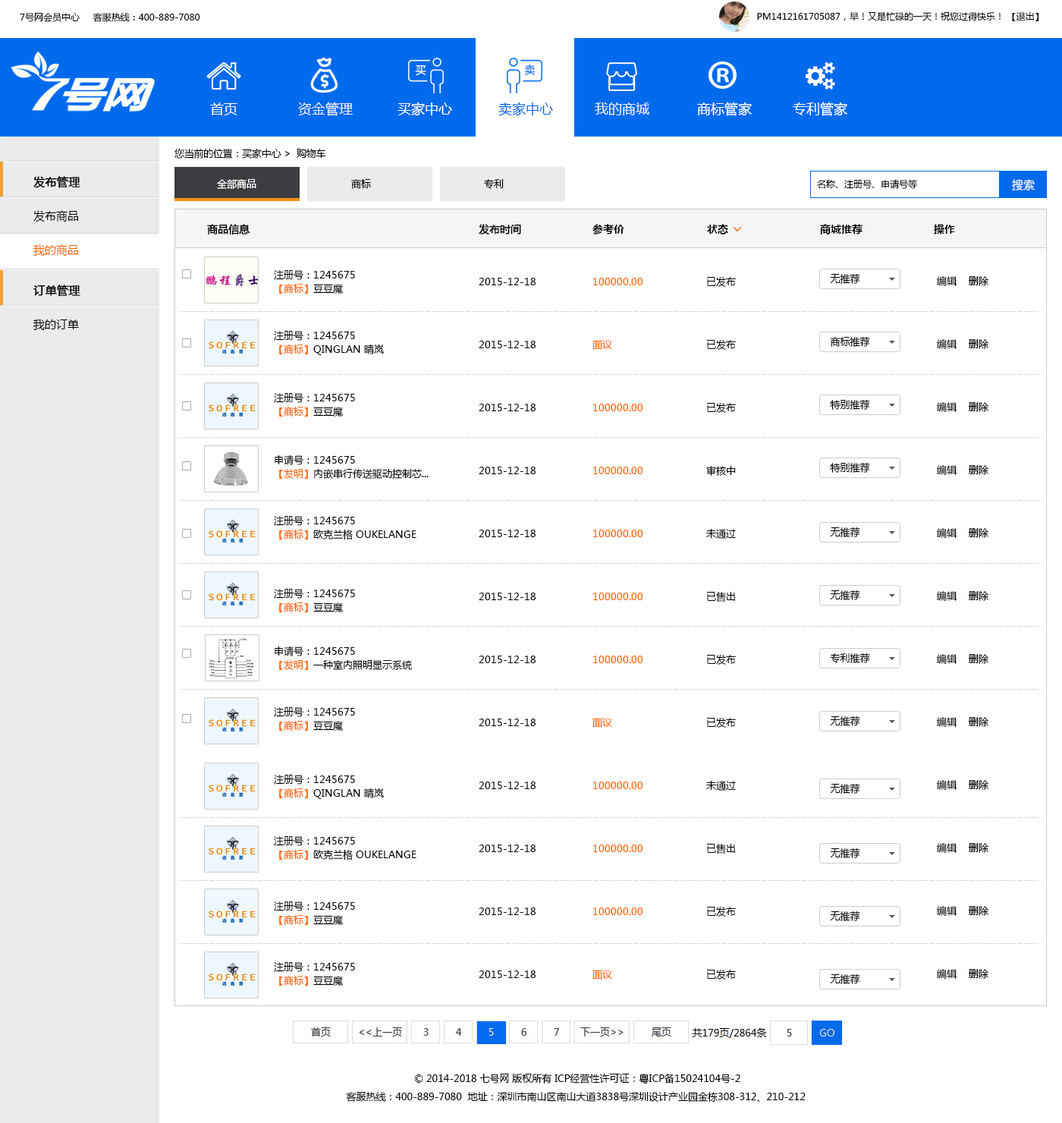
<style>
.page{position:relative;width:1062px;height:1123px;background:#ffffff}
.page>*{position:absolute;margin:0}
.t1{font:9.1px "MicrosoftYaHei";color:#000000}
.t2{font:10.6px "MicrosoftYaHei";color:#ffffff}
.t3{font:10.6px "MicrosoftYaHei";color:#006aed}
.t4{font:13.7px "MicrosoftYaHei";color:#ecf0f1}
.t5{font:13.7px "MicrosoftYaHei";color:#ffffff}
.t6{font:13.7px "MicrosoftYaHei";color:#006aed}
.t7{font:9.9px "MicrosoftYaHei";letter-spacing:-0.02em;color:#000000}
.t8{font:11.4px/34.1px "MicrosoftYaHei";color:#000000;font-weight:bold}
.t9{font:11.4px/34.1px "MicrosoftYaHei";color:#000000}
.t10{font:11.4px/34.1px "MicrosoftYaHei";color:#ff6600}
.t11{font:9.9px "MicrosoftYaHei";color:#ffffff}
.t12{font:9.9px "MicrosoftYaHei";color:#000000}
.t13{font:11.4px "MicrosoftYaHei";color:#ffffff}
.t14{font:10.6px "MicrosoftYaHei";color:#000000;font-weight:bold}
.t15{font:10.6px "MicrosoftYaHei-Bold";color:#000000}
.t16{font:9.9px/13.7px "MicrosoftYaHei";color:#000000}
.t17{font:9.9px/13.7px "MicrosoftYaHei";color:#ff6600}
.t18{font:9.9px/63px "MicrosoftYaHei";color:#000000}
.t19{font:9.9px/63px "MicrosoftYaHei";color:#ff6600}
.t20{font:9.9px/18.2px "MicrosoftYaHei";color:#000000}
</style>
<div class="page">
<p class="t1" style="left:20px;top:12px;width:180px;height:10px">7号网会员中心     客服热线：400-889-7080</p>
<p class="t1" style="left:757px;top:12px;width:282px;height:9px">PM1412161705087，早！又是忙碌的一天！祝您过得快乐！ 【退出】</p>
<p class="t2" style="left:415px;top:65px;width:11px;height:11px">买</p>
<p class="t3" style="left:524px;top:64px;width:12px;height:11px">卖</p>
<p class="t4" style="left:298px;top:102px;width:55px;height:14px">资金管理</p>
<p class="t5" style="left:398px;top:102px;width:54px;height:14px">买家中心</p>
<p class="t6" style="left:498px;top:102px;width:55px;height:14px">卖家中心</p>
<p class="t5" style="left:697px;top:102px;width:55px;height:14px">商标管家</p>
<p class="t5" style="left:793px;top:102px;width:54px;height:14px">专利管家</p>
<p class="t5" style="left:210px;top:102px;width:27px;height:13px">首页</p>
<p class="t4" style="left:595px;top:102px;width:54px;height:13px">我的商城</p>
<p class="t7" style="left:174px;top:148px;width:152px;height:11px">您当前的位置：买家中心 &gt;  购物车</p>
<p class="t8" style="left:33px;top:176px;width:47px;height:80px">发布管理<br><span class="t9">发布商品<br></span><span class="t10">我的商品</span></p>
<p class="t11" style="left:217px;top:179px;width:39px;height:10px">全部商品</p>
<p class="t12" style="left:351px;top:179px;width:20px;height:10px">商标</p>
<p class="t12" style="left:484px;top:179px;width:20px;height:10px">专利</p>
<p class="t1" style="left:817px;top:179px;width:100px;height:10px">名称、注册号、申请号等</p>
<p class="t13" style="left:1012px;top:179px;width:23px;height:12px">搜索</p>
<p class="t14" style="left:207px;top:224px;width:43px;height:11px">商品信息</p>
<p class="t14" style="left:479px;top:224px;width:42px;height:10px">发布时间</p>
<p class="t15" style="left:592px;top:224px;width:32px;height:10px">参考价</p>
<p class="t15" style="left:707px;top:224px;width:21px;height:10px">状态</p>
<p class="t15" style="left:820px;top:224px;width:43px;height:10px">商城推荐</p>
<p class="t15" style="left:934px;top:224px;width:21px;height:10px">操作</p>
<p class="t16" style="left:274px;top:270px;width:81px;height:24px">注册号：1245675<br><span class="t17">【商标】</span>豆豆魔</p>
<p class="t18" style="left:479px;top:278px;width:57px;height:700px">2015-12-18<br>2015-12-18<br>2015-12-18<br>2015-12-18<br>2015-12-18<br>2015-12-18<br>2015-12-18<br>2015-12-18<br>2015-12-18<br>2015-12-18<br>2015-12-18<br>2015-12-18</p>
<p class="t19" style="left:592px;top:278px;width:51px;height:701px">100000.00<br>面议<br>100000.00<br>100000.00<br>100000.00<br>100000.00<br>100000.00<br>面议<br>100000.00<br>100000.00<br>100000.00<br>面议</p>
<p class="t18" style="left:706px;top:276px;width:30px;height:703px">已发布<br>已发布<br>已发布<br>审核中<br>未通过<br>已售出<br>已发布<br>已发布<br>未通过<br>已售出<br>已发布<br>已发布</p>
<p class="t12" style="left:830px;top:273px;width:30px;height:11px">无推荐</p>
<p class="t18" style="left:936px;top:276px;width:52px;height:703px">编辑    删除<br>编辑    删除<br>编辑    删除<br>编辑    删除<br>编辑    删除<br>编辑    删除<br>编辑    删除<br>编辑    删除<br>编辑    删除<br>编辑    删除<br>编辑    删除<br>编辑    删除</p>
<p class="t8" style="left:33px;top:284px;width:47px;height:47px">订单管理<br><span class="t9">我的订单</span></p>
<p class="t16" style="left:274px;top:331px;width:110px;height:24px">注册号：1245675<br><span class="t17">【商标】</span>QINGLAN 晴岚</p>
<p class="t12" style="left:830px;top:336px;width:40px;height:11px">商标推荐</p>
<p class="t16" style="left:274px;top:393px;width:81px;height:23px">注册号：1245675<br><span class="t17">【商标】</span>豆豆魔</p>
<p class="t12" style="left:830px;top:399px;width:40px;height:11px">特别推荐</p>
<p class="t16" style="left:275px;top:454px;width:154px;height:25px">申请号：1245675<br><span class="t17">【发明】</span>内嵌串行传送驱动控制芯...</p>
<p class="t12" style="left:830px;top:462px;width:40px;height:11px">特别推荐</p>
<p class="t16" style="left:274px;top:516px;width:142px;height:24px">注册号：1245675<br><span class="t17">【商标】</span>欧克兰格 OUKELANGE</p>
<p class="t12" style="left:830px;top:526px;width:30px;height:11px">无推荐</p>
<p class="t16" style="left:274px;top:589px;width:81px;height:23px">注册号：1245675<br><span class="t17">【商标】</span>豆豆魔</p>
<p class="t12" style="left:830px;top:589px;width:30px;height:11px">无推荐</p>
<p class="t16" style="left:275px;top:646px;width:137px;height:24px">申请号：1245675<br><span class="t17">【发明】</span>一种室内照明显示系统</p>
<p class="t12" style="left:830px;top:652px;width:40px;height:11px">专利推荐</p>
<p class="t16" style="left:274px;top:707px;width:81px;height:24px">注册号：1245675<br><span class="t17">【商标】</span>豆豆魔</p>
<p class="t12" style="left:830px;top:715px;width:30px;height:11px">无推荐</p>
<p class="t16" style="left:274px;top:775px;width:110px;height:24px">注册号：1245675<br><span class="t17">【商标】</span>QINGLAN 晴岚</p>
<p class="t12" style="left:830px;top:783px;width:30px;height:11px">无推荐</p>
<p class="t16" style="left:274px;top:836px;width:142px;height:24px">注册号：1245675<br><span class="t17">【商标】</span>欧克兰格 OUKELANGE</p>
<p class="t12" style="left:830px;top:847px;width:30px;height:11px">无推荐</p>
<p class="t16" style="left:274px;top:901px;width:81px;height:24px">注册号：1245675<br><span class="t17">【商标】</span>豆豆魔</p>
<p class="t12" style="left:830px;top:910px;width:30px;height:11px">无推荐</p>
<p class="t16" style="left:274px;top:962px;width:81px;height:23px">注册号：1245675<br><span class="t17">【商标】</span>豆豆魔</p>
<p class="t12" style="left:830px;top:973px;width:30px;height:11px">无推荐</p>
<p class="t20" style="left:346px;top:1073px;width:460px;height:29px;text-align:center">© 2014-2018 七号网 版权所有 ICP经营性许可证：粤ICP备15024104号-2<br>客服热线：400-889-7080  地址：深圳市南山区南山大道3838号深圳设计产业园金栋308-312、210-212</p>
</div>
